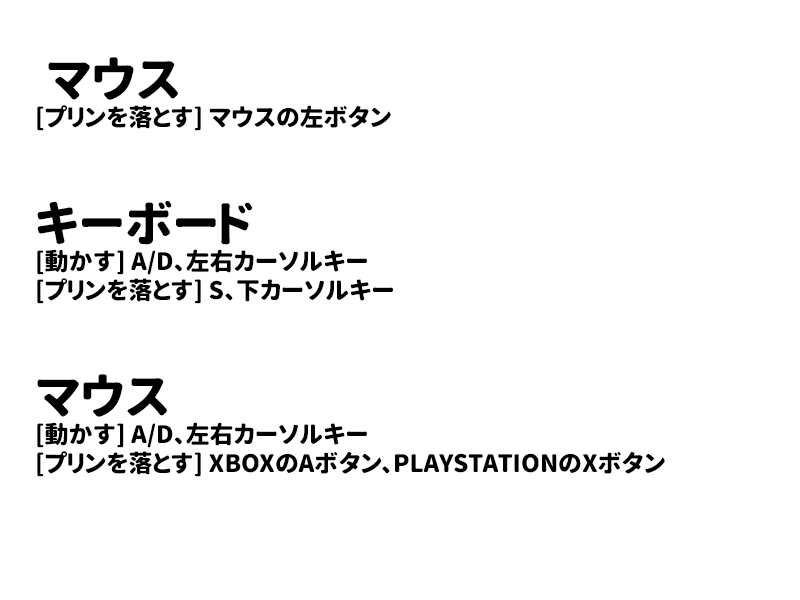
<style>
.page{position:relative;width:800px;height:600px;background:#ffffff}
.page>*{position:absolute;margin:0}
.t1{font:24px "GenJyuuGothic-P-Heavy";color:#000000}
.t2{font:48px "GenJyuuGothic-P-Heavy";color:#000000}
</style>
<div class="page">
<p class="t1" style="left:37px;top:57px;width:628px;height:420px"><span class="t2"> マウス <br></span>[プリンを落とす] マウスの左ボタン<br> <span class="t2"><br>キーボード  <br></span>[動かす] A/D、左右カーソルキー<br>[プリンを落とす] S、下カーソルキー<br> <span class="t2"><br>マウス <br></span>[動かす] A/D、左右カーソルキー<br>[プリンを落とす] XBOXのAボタン、PLAYSTATIONのXボタン</p>
</div>
